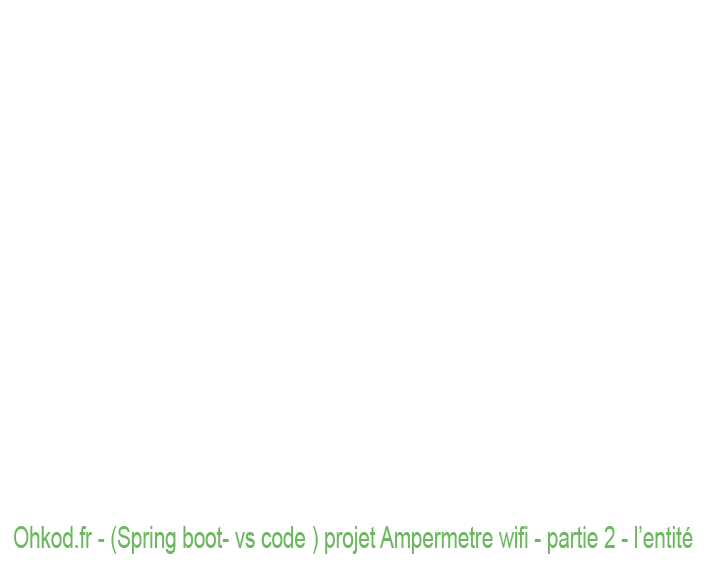
<style>
.page{position:relative;width:720px;height:576px;background:#ffffff}
.page>*{position:absolute;margin:0}
.t1{font:30px "ArialMT";color:#6cb85e;scale:0.69 1}
</style>
<div class="page">
<p class="t1" style="left:14px;top:526px;width:679px;height:28px">Ohkod.fr - (Spring boot- vs code ) projet Ampermetre wifi - partie 2 - l’entité</p>
</div>
